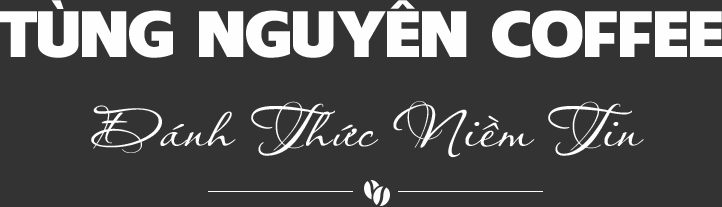
<style>
.page{position:relative;width:722px;height:207px;background:#333333}
.page>*{position:absolute;margin:0}
.t1{font:58.5px "UTM-American-Sans";color:#fffefe;scale:1.27 1}
.t2{font:50px "UTM-Aquarelle";color:#fffefe;scale:1.18 1}
</style>
<div class="page">
<p class="t1" style="left:0px;top:0px;width:722px;height:58px">TÙNG NGUYÊN COFFEE</p>
<p class="t2" style="left:91px;top:101px;width:553px;height:57px">Đánh Thức Niềm Tin</p>
</div>
